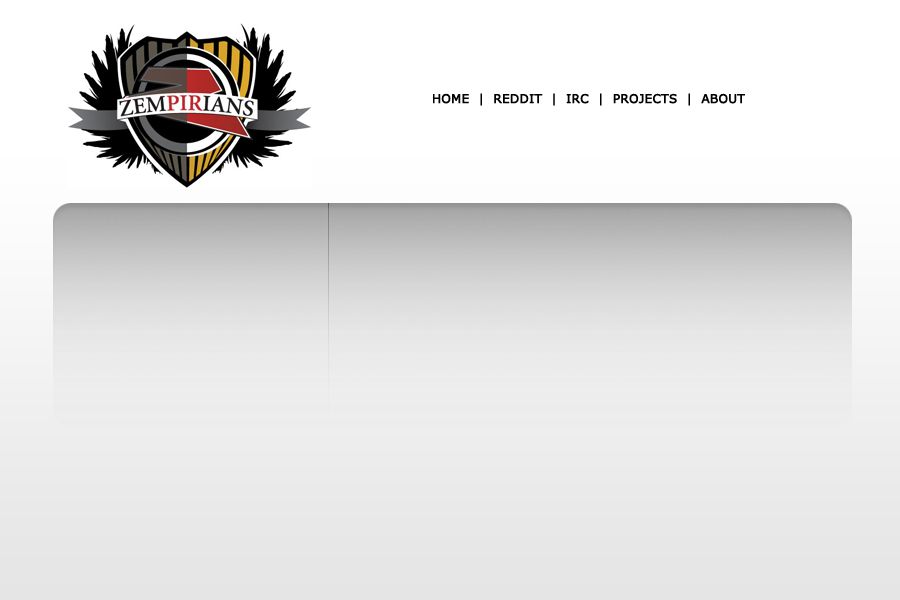
<style>
.page{position:relative;width:900px;height:600px;background:#ffffff}
.page>*{position:absolute;margin:0}
.t1{font:12px "Verdana";color:#000000;font-weight:bold}
</style>
<div class="page">
<p class="t1" style="left:433px;top:93px;width:312px;height:13px">HOME  |  REDDIT  |  IRC  |  PROJECTS  |  ABOUT</p>
</div>
